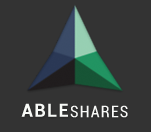
<style>
.page{position:relative;width:151px;height:132px;background:#333333}
.page>*{position:absolute;margin:0}
.t1{font:18px "Roboto-Bold";letter-spacing:0.075em;color:#f8faf7}
.t2{font:16px "Roboto-Condensed";letter-spacing:0.075em;color:#f9faf8}
</style>
<div class="page">
<p class="t1" style="left:21px;top:103px;width:47px;height:14px">ABLE</p>
<p class="t2" style="left:70px;top:105px;width:58px;height:13px">SHARES</p>
</div>
